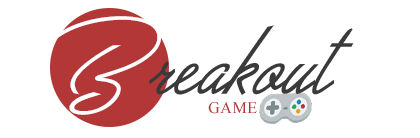
<style>
.page{position:relative;width:420px;height:138px;background:#ffffff}
.page>*{position:absolute;margin:0}
.t1{font:82px "GreatDayPersonalUse";color:#3a3a3a}
.t2{font:72px "GreatDayPersonalUse";letter-spacing:0.14em;color:#ffffff}
.t3{font:16px "TimesNewRomanPSMT";color:#b33737;text-transform:uppercase}
</style>
<div class="page">
<p class="t1" style="left:42px;top:16px;width:312px;height:99px"><span class="t2">B</span>reakout</p>
<p class="t3" style="left:208px;top:102px;width:49px;height:12px">GAME</p>
</div>
